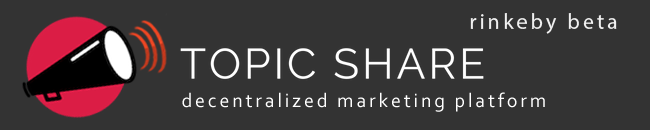
<style>
.page{position:relative;width:650px;height:130px;background:#333333}
.page>*{position:absolute;margin:0}
.t1{font:22px "MyriadPro-Regular";letter-spacing:0.14em;color:#f0f0f0}
.t2{font:20px "Corbel";letter-spacing:0.14em;color:#ffffff}
</style>
<div class="page">
<p class="t1" style="left:470px;top:13px;width:147px;height:21px">rinkeby beta</p>
<p class="t2" style="left:182px;top:92px;width:363px;height:20px">decentralized marketing platform</p>
</div>
